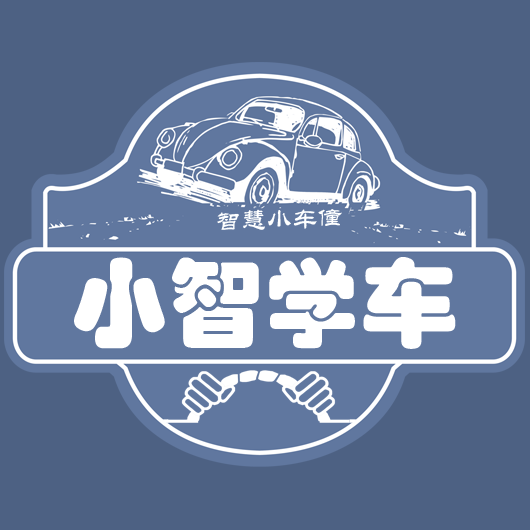
<style>
.page{position:relative;width:530px;height:530px;background:#4d6183}
.page>*{position:absolute;margin:0}
.t1{font:25.7px "STLiti";color:#feffff}
.t2{font:97.2px "STHupo";color:#ffffff}
</style>
<div class="page">
<p class="t1" style="left:217px;top:209px;width:125px;height:21px;rotate:-2deg">智慧小车僮</p>
<p class="t2" style="left:74px;top:257px;width:382px;height:92px">小智学车</p>
</div>
